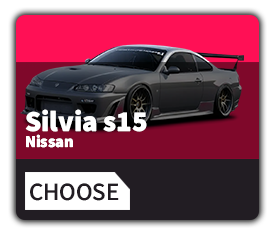
<style>
.page{position:relative;width:273px;height:232px}
.page>*{position:absolute;margin:0}
.t1{font:28.9px/16.5px "SourceSans3Roman-Black";color:#ffffff}
.t2{font:16.5px/16.5px "SourceSans3Roman-Black";color:#ffffff}
.t3{font:24.8px "SourceSans3Roman_500.000wght_0ital";color:#221d23}
</style>
<div class="page">
<p class="t1" style="left:25px;top:109px;width:122px;height:39px">Silvia s15<br><span class="t2">Nissan</span></p>
<p class="t3" style="left:30px;top:183px;width:89px;height:18px">CHOOSE</p>
</div>
